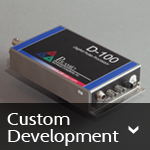
<style>
.page{position:relative;width:150px;height:150px}
.page>*{position:absolute;margin:0}
.t1{font:16.7px/17.9px "Cabin-Regular";letter-spacing:-0.01em;color:#ffffff;scale:1.16 1}
</style>
<div class="page">
<p class="t1" style="left:7px;top:113px;width:112px;height:33px">Custom<br>Development</p>
</div>
